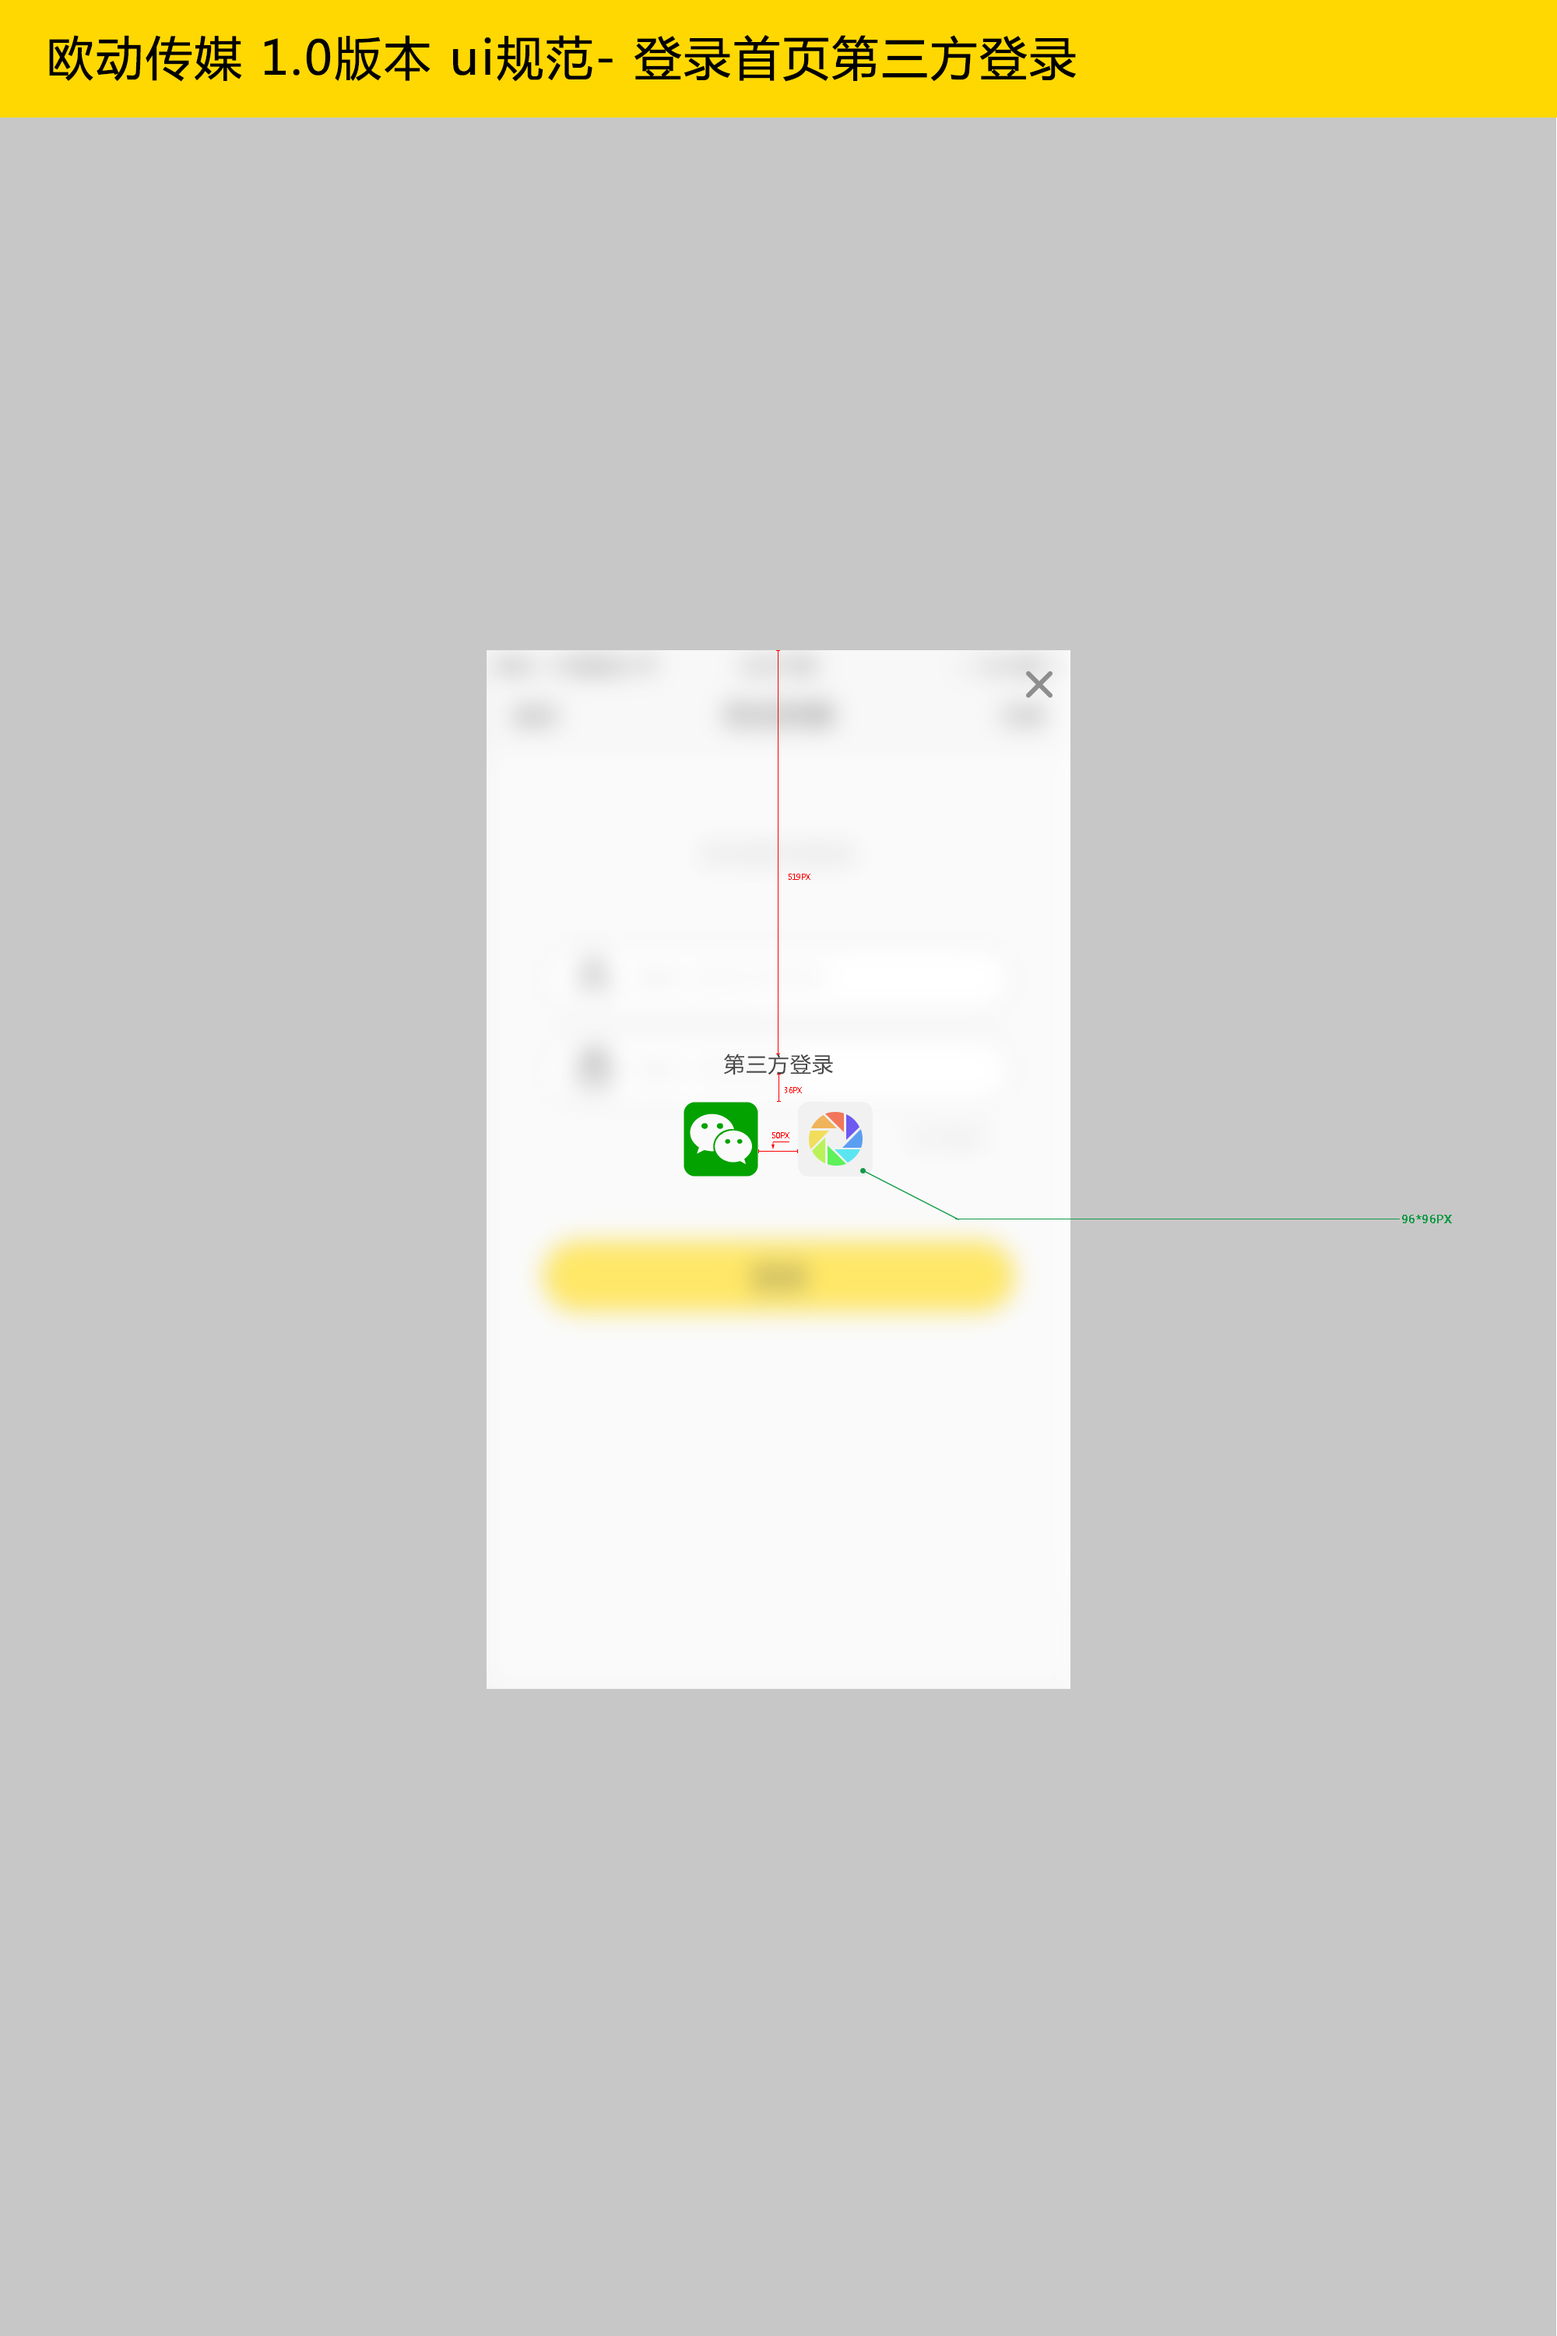
<style>
.page{position:relative;width:1557px;height:2336px;background:#c7c7c7}
.page>*{position:absolute;margin:0}
.t1{font:46.7px "MicrosoftYaHei";letter-spacing:0.03em;color:#000000;font-weight:bold}
.t2{font:7.7px "MicrosoftYaHei";color:#fe0000;scale:0.96 1}
.t3{font:11.7px "MicrosoftYaHei";color:#119a45;font-weight:bold;scale:0.96 1}
</style>
<div class="page">
<p class="t1" style="left:49px;top:34px;width:1027px;height:48px">欧动传媒 1.0版本 ui规范- 登录首页第三方登录</p>
<p class="t2" style="left:789px;top:874px;width:22px;height:6px">519PX</p>
<p class="t2" style="left:785px;top:1087px;width:17px;height:6px">36PX</p>
<p class="t2" style="left:772px;top:1132px;width:18px;height:6px">50PX</p>
<p class="t3" style="left:1402px;top:1215px;width:50px;height:8px">96*96PX</p>
</div>
